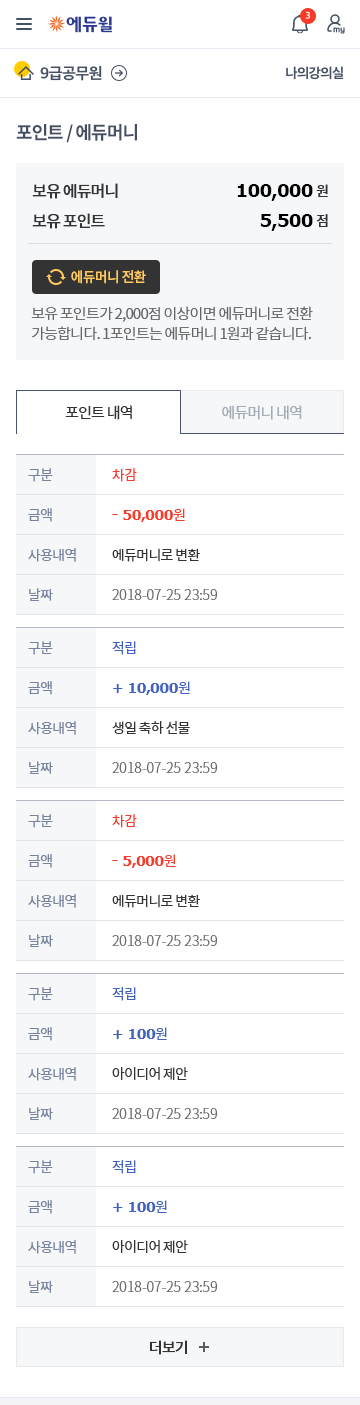
<style>
.page{position:relative;width:360px;height:1405px;background:#ffffff}
.page>*{position:absolute;margin:0}
.t1{font:18px "NotoSansCJKkr-Bold";letter-spacing:-0.05em;color:#454f63}
.t2{font:16px/30px "NotoSansCJKkr-Medium";letter-spacing:-0.05em;color:#333333}
.t3{font:18px/30px "Verdana-Bold";letter-spacing:-0.05em;color:#000000}
.t4{font:14px/30px "NotoSansCJKkr-Medium";letter-spacing:-0.05em;color:#333333}
.t5{font:14px "NotoSansCJKkr-Medium";letter-spacing:-0.05em;color:#ffc960}
.t6{font:15px/20px "NotoSansCJKkr-DemiLight";letter-spacing:-0.05em;color:#666666}
.t7{font:15px "NotoSansCJKkr-Regular";letter-spacing:-0.05em;color:#333333}
.t8{font:15px "NotoSansCJKkr-Regular";letter-spacing:-0.05em;color:#a4acb5}
.t9{font:14px/40px "NotoSansCJKkr-Regular";letter-spacing:-0.05em;color:#78849e}
.t10{font:14px/40px "NotoSansCJKkr-Light";color:#666666}
.t11{font:14px/40px "NotoSansCJKkr-Regular";letter-spacing:-0.05em;color:#f63b28}
.t12{font:14px/40px "Verdana-Bold";letter-spacing:-0.05em;color:#f63b28}
.t13{font:14px/40px "NotoSansCJKkr-Regular";letter-spacing:-0.05em;color:#333333}
.t14{font:14px/40px "NotoSansCJKkr-Regular";letter-spacing:-0.05em;color:#3f63bf}
.t15{font:14px/40px "Verdana-Bold";letter-spacing:-0.05em;color:#3f63bf}
.t16{font:15px "NotoSansCJKkr-Medium";letter-spacing:-0.05em;color:#333333}
</style>
<div class="page">
<p class="t1" style="left:16px;top:124px;width:121px;height:19px">포인트 / 에듀머니</p>
<p class="t2" style="left:32px;top:183px;width:86px;height:46px">보유 에듀머니<br>보유 포인트</p>
<p class="t3" style="left:237px;top:184px;width:76px;height:47px;text-align:right">100,000<br>5,500</p>
<p class="t4" style="left:316px;top:184px;width:12px;height:43px">원<br>점</p>
<p class="t5" style="left:71px;top:270px;width:75px;height:14px">에듀머니 전환</p>
<p class="t6" style="left:31px;top:306px;width:282px;height:35px">보유 포인트가 2,000점 이상이면 에듀머니로 전환 <br>가능합니다. 1포인트는 에듀머니 1원과 같습니다.</p>
<p class="t7" style="left:65px;top:405px;width:67px;height:15px">포인트 내역</p>
<p class="t8" style="left:222px;top:405px;width:80px;height:15px">에듀머니 내역</p>
<p class="t9" style="left:28px;top:468px;width:48px;height:133px">구분<br>금액<br>사용내역<br>날짜</p>
<p class="t10" style="left:112px;top:468px;width:106px;height:132px"><span class="t11">차감<br></span><span class="t12">- 50,000</span><span class="t11">원<br></span><span class="t13">에듀머니로 변환<br></span>2018-07-25 23:59</p>
<p class="t9" style="left:28px;top:641px;width:48px;height:133px">구분<br>금액<br>사용내역<br>날짜</p>
<p class="t10" style="left:112px;top:641px;width:106px;height:132px"><span class="t14">적립<br></span><span class="t15">+ 10,000</span><span class="t14">원<br></span><span class="t13">생일 축하 선물<br></span>2018-07-25 23:59</p>
<p class="t9" style="left:28px;top:814px;width:48px;height:133px">구분<br>금액<br>사용내역<br>날짜</p>
<p class="t10" style="left:112px;top:814px;width:106px;height:132px"><span class="t11">차감<br></span><span class="t12">- 5,000</span><span class="t11">원<br></span><span class="t13">에듀머니로 변환<br></span>2018-07-25 23:59</p>
<p class="t9" style="left:28px;top:987px;width:48px;height:133px">구분<br>금액<br>사용내역<br>날짜</p>
<p class="t10" style="left:112px;top:987px;width:106px;height:132px"><span class="t14">적립<br></span><span class="t15">+ 100</span><span class="t14">원<br></span><span class="t13">아이디어 제안<br></span>2018-07-25 23:59</p>
<p class="t9" style="left:28px;top:1160px;width:48px;height:133px">구분<br>금액<br>사용내역<br>날짜</p>
<p class="t10" style="left:112px;top:1160px;width:106px;height:132px"><span class="t14">적립<br></span><span class="t15">+ 100</span><span class="t14">원<br></span><span class="t13">아이디어 제안<br></span>2018-07-25 23:59</p>
<p class="t16" style="left:150px;top:1340px;width:37px;height:15px">더보기</p>
</div>
